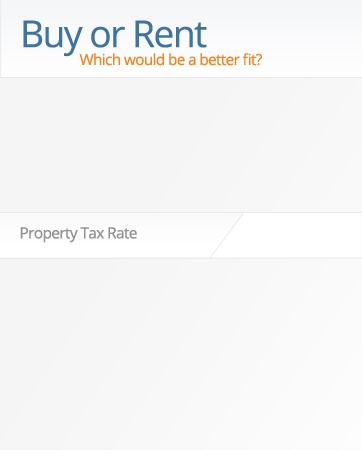
<style>
.page{position:relative;width:362px;height:450px;background:#f6f5f5}
.page>*{position:absolute;margin:0}
.t1{font:37.1px "OpenSans";letter-spacing:-0.04em;color:#3d74a4}
.t2{font:15.3px "OpenSans";letter-spacing:-0.04em;color:#f38620}
.t3{font:15.4px "OpenSans";letter-spacing:-0.04em;color:#929292}
</style>
<div class="page">
<p class="t1" style="left:23px;top:20px;width:184px;height:37px">Buy or Rent</p>
<p class="t2" style="left:79px;top:53px;width:183px;height:13px">Which would be a better fit?</p>
<p class="t3" style="left:20px;top:227px;width:117px;height:16px">Property Tax Rate</p>
</div>
